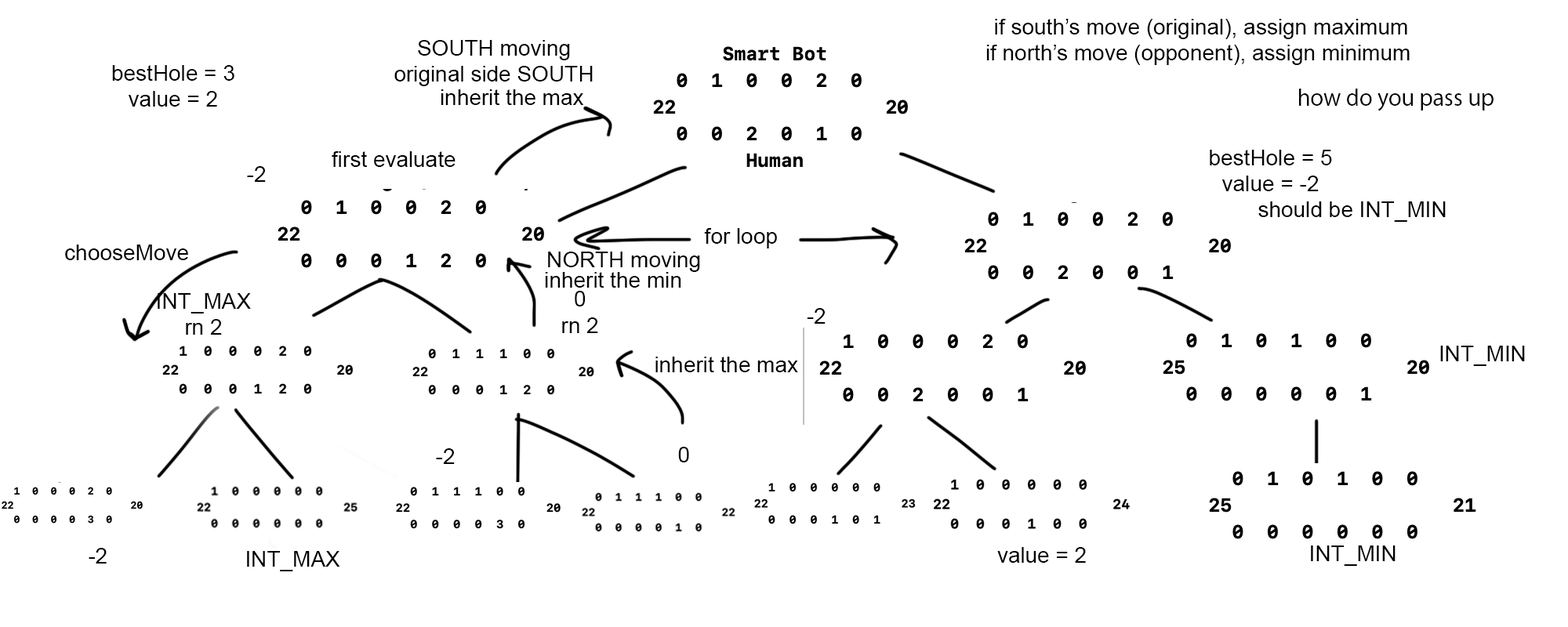
<style>
.page{position:relative;width:1568px;height:627px;background:#ffffff}
.page>*{position:absolute;margin:0}
.t1{font:22px "ArialMT";color:#000000}
.t2{font:22px "KozGoPr6N-Regular";color:#000000}
</style>
<div class="page">
<p class="t1" style="left:986px;top:19px;width:424px;height:46px;text-align:center">if south’s move (original), assign maximum<br>if north’s move (opponent), assign minimum</p>
<p class="t1" style="left:394px;top:40px;width:199px;height:46px;text-align:center">SOUTH moving<br>original side SOUTH</p>
<p class="t1" style="left:112px;top:65px;width:122px;height:42px;text-align:center">bestHole = 3<br>value = 2</p>
<p class="t1" style="left:441px;top:89px;width:143px;height:16px">inherit the max</p>
<p class="t2" style="left:1299px;top:89px;width:195px;height:22px">how do you pass up</p>
<p class="t1" style="left:1210px;top:150px;width:122px;height:41px;text-align:center">bestHole = 5<br>value = -2</p>
<p class="t1" style="left:332px;top:151px;width:124px;height:16px">first evaluate</p>
<p class="t1" style="left:247px;top:166px;width:19px;height:16px">-2</p>
<p class="t1" style="left:1258px;top:201px;width:188px;height:21px">should be INT_MIN</p>
<p class="t1" style="left:704px;top:228px;width:73px;height:21px">for loop</p>
<p class="t1" style="left:65px;top:245px;width:123px;height:15px">chooseMove</p>
<p class="t1" style="left:548px;top:252px;width:152px;height:20px">NORTH moving</p>
<p class="t1" style="left:545px;top:272px;width:136px;height:16px">inherit the min</p>
<p class="t1" style="left:158px;top:293px;width:93px;height:42px;text-align:center">INT_MAX<br>rn 2</p>
<p class="t1" style="left:562px;top:291px;width:36px;height:42px;text-align:center">0<br>rn 2</p>
<p class="t1" style="left:807px;top:308px;width:19px;height:16px">-2</p>
<p class="t1" style="left:1440px;top:346px;width:85px;height:20px">INT_MIN</p>
<p class="t1" style="left:655px;top:357px;width:143px;height:15px">inherit the max</p>
<p class="t1" style="left:436px;top:448px;width:19px;height:16px">-2</p>
<p class="t1" style="left:678px;top:447px;width:11px;height:16px">0</p>
<p class="t1" style="left:1311px;top:546px;width:85px;height:20px">INT_MIN</p>
<p class="t1" style="left:89px;top:548px;width:18px;height:16px">-2</p>
<p class="t1" style="left:247px;top:551px;width:93px;height:21px">INT_MAX</p>
<p class="t1" style="left:997px;top:547px;width:89px;height:16px">value = 2</p>
</div>
